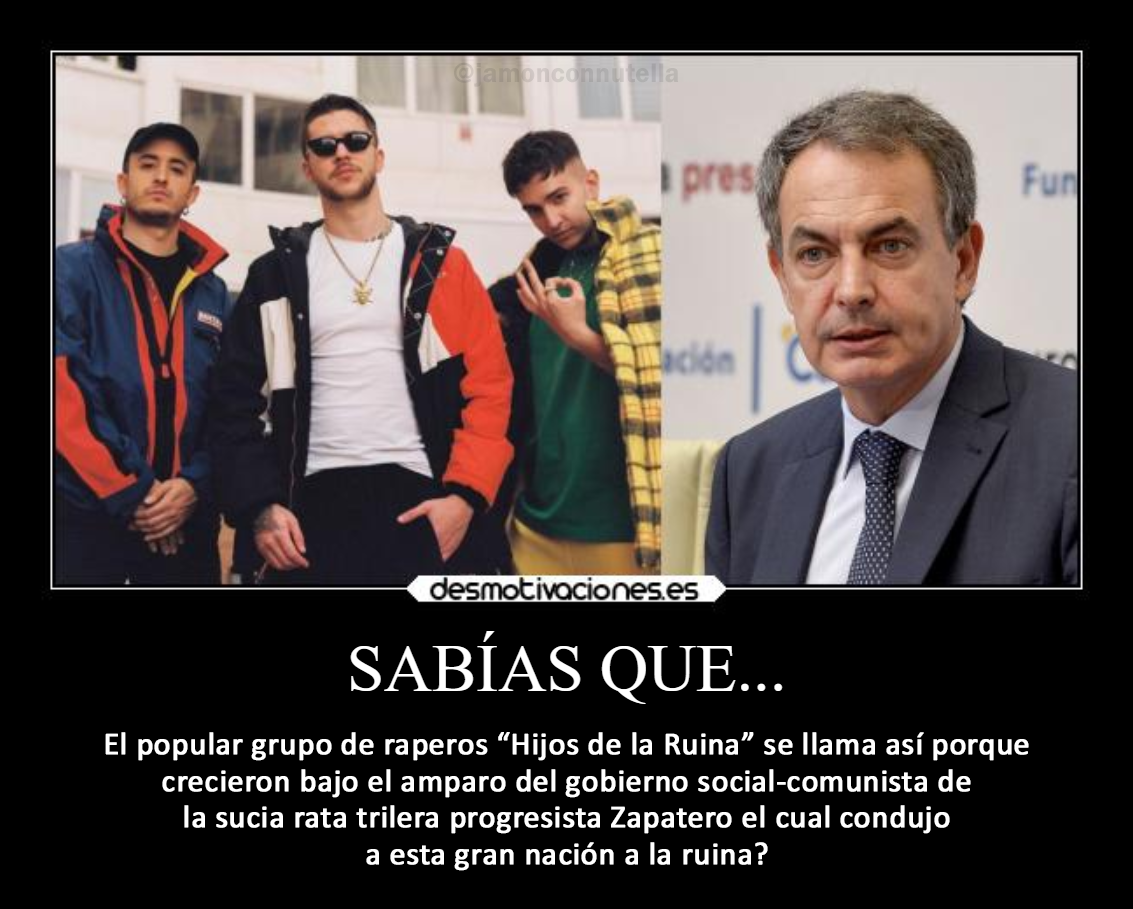
<style>
.page{position:relative;width:1133px;height:909px;background:#000000}
.page>*{position:absolute;margin:0}
.t1{font:27.9px "FranklinGothic-Demi"}
.t2{font:32.1px "Calibri";color:#ffffff;font-weight:bold}
</style>
<div class="page">
<p class="t1" style="left:454px;top:62px;width:225px;height:25px">@jamonconnutella</p>
<p class="t2" style="left:105px;top:732px;width:924px;height:139px;text-align:center">El popular grupo de raperos “Hijos de la Ruina” se llama así porque<br>crecieron bajo el amparo del gobierno social-comunista de<br>la sucia rata trilera progresista Zapatero el cual condujo<br>a esta gran nación a la ruina?</p>
</div>
